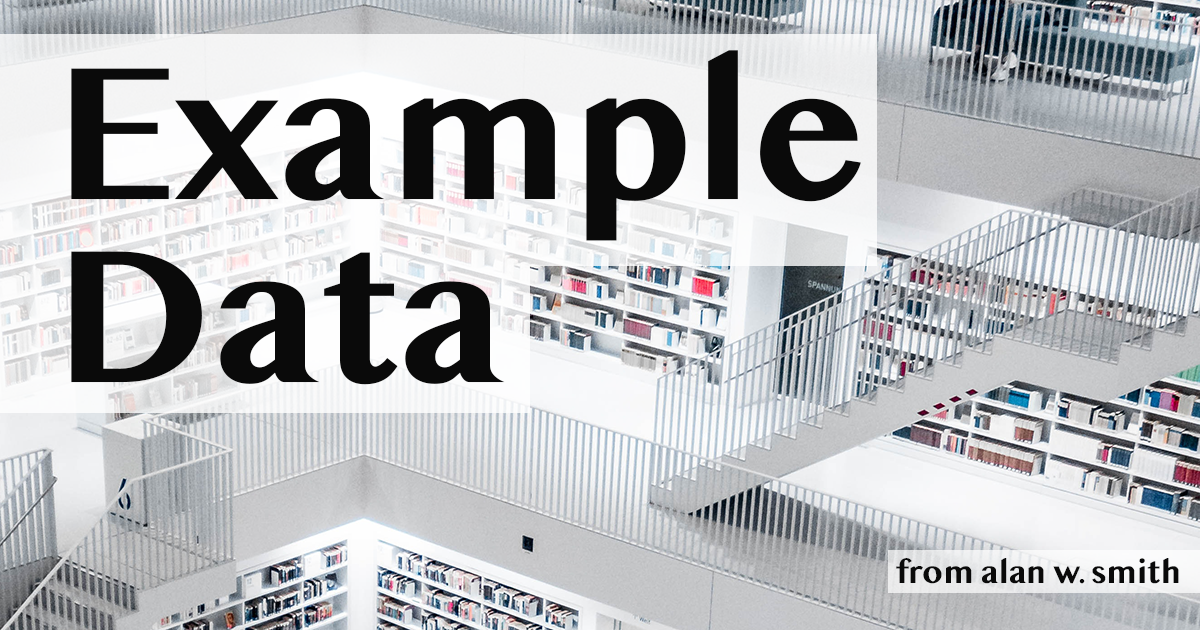
<style>
.page{position:relative;width:1200px;height:630px}
.page>*{position:absolute;margin:0}
.t1{font:197px/183px "LaoMN-Bold";color:#0a0a0a}
.t2{font:33px "LaoMN-Bold";color:#0a0a0a}
</style>
<div class="page">
<p class="t1" style="left:71px;top:50px;width:790px;height:335px">Example<br>Data</p>
<p class="t2" style="left:896px;top:558px;width:283px;height:26px">from alan w. smith</p>
</div>
